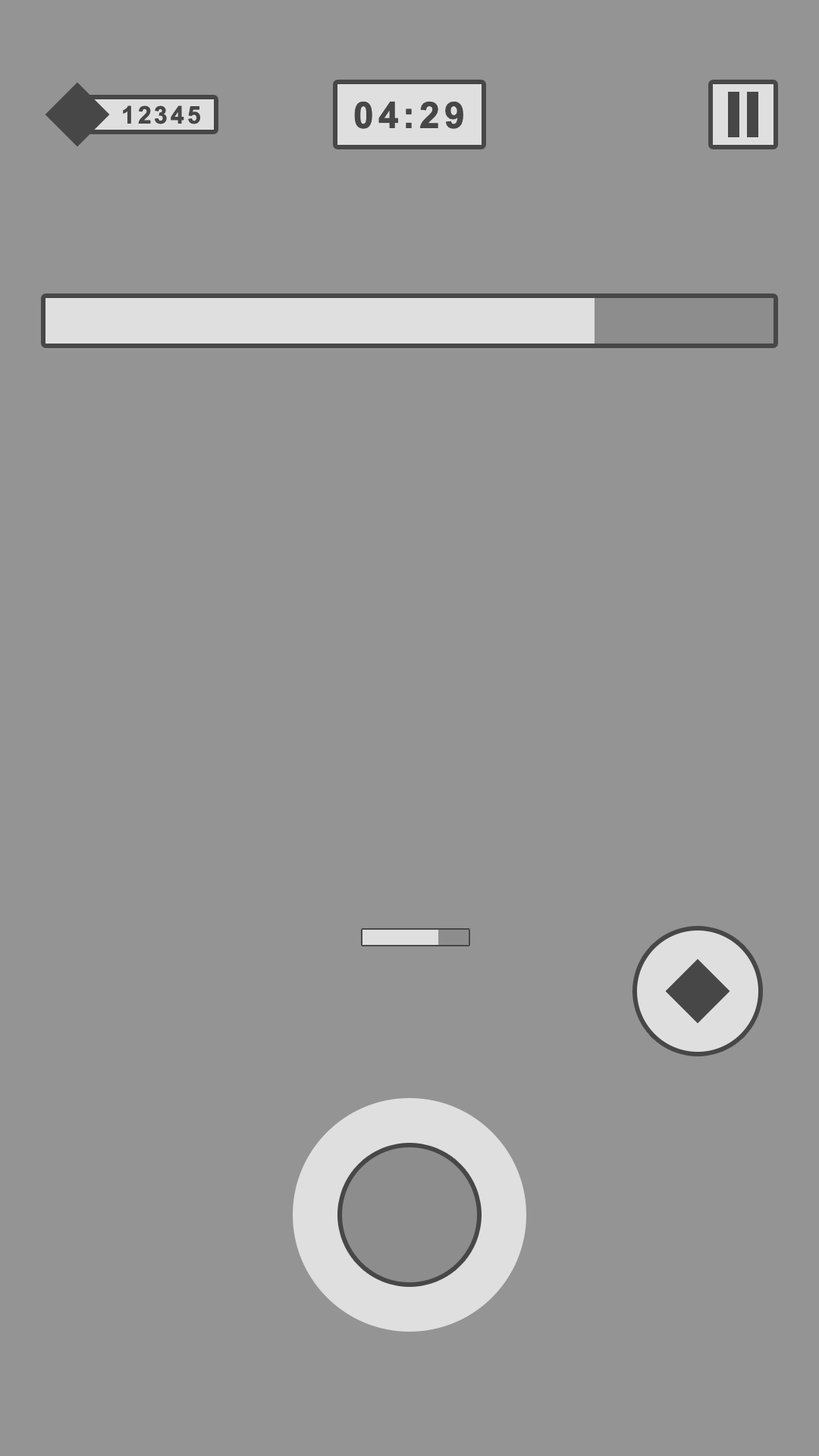
<style>
.page{position:relative;width:819px;height:1456px;background:#949494}
.page>*{position:absolute;margin:0}
.t1{font:36.4px "Arial-BoldMT";letter-spacing:0.12em;color:#474747}
.t2{font:24.3px "Arial-BoldMT";letter-spacing:0.12em;color:#474747}
</style>
<div class="page">
<p class="t1" style="left:354px;top:101px;width:109px;height:28px">04:29</p>
<p class="t2" style="left:123px;top:105px;width:77px;height:19px">12345</p>
</div>
